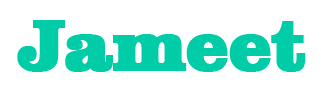
<style>
.page{position:relative;width:321px;height:92px;background:#ffffff}
.page>*{position:absolute;margin:0}
.t1{font:75px "ClarendonBT-Black";letter-spacing:-0.025em;color:#00cca8;font-weight:bold}
</style>
<div class="page">
<p class="t1" style="left:17px;top:20px;width:289px;height:52px">Jameet</p>
</div>
